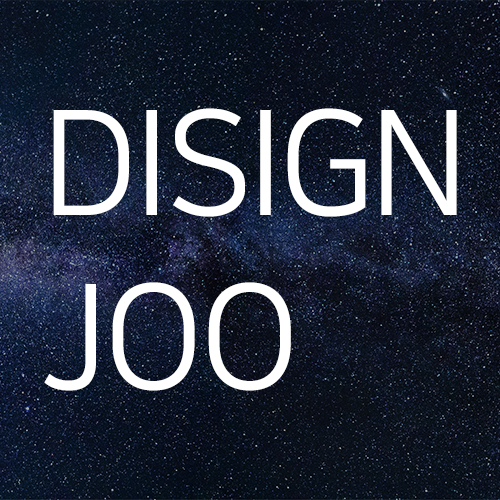
<style>
.page{position:relative;width:500px;height:500px}
.page>*{position:absolute;margin:0}
.t1{font:144.9px "NanumSquare_acR";letter-spacing:-0.055em;color:#ffffff;text-transform:uppercase;font-weight:bold}
</style>
<div class="page">
<p class="t1" style="left:44px;top:108px;width:413px;height:283px">disign<br>joo</p>
</div>
